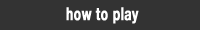
<style>
.page{position:relative;width:200px;height:30px;background:#333333}
.page>*{position:absolute;margin:0}
.t1{font:18px "HelveticaNeue-Bold";letter-spacing:0.025em;color:#ffffff;font-weight:bold;scale:0.67 1}
</style>
<div class="page">
<p class="t1" style="left:66px;top:7px;width:73px;height:17px">how to play</p>
</div>
